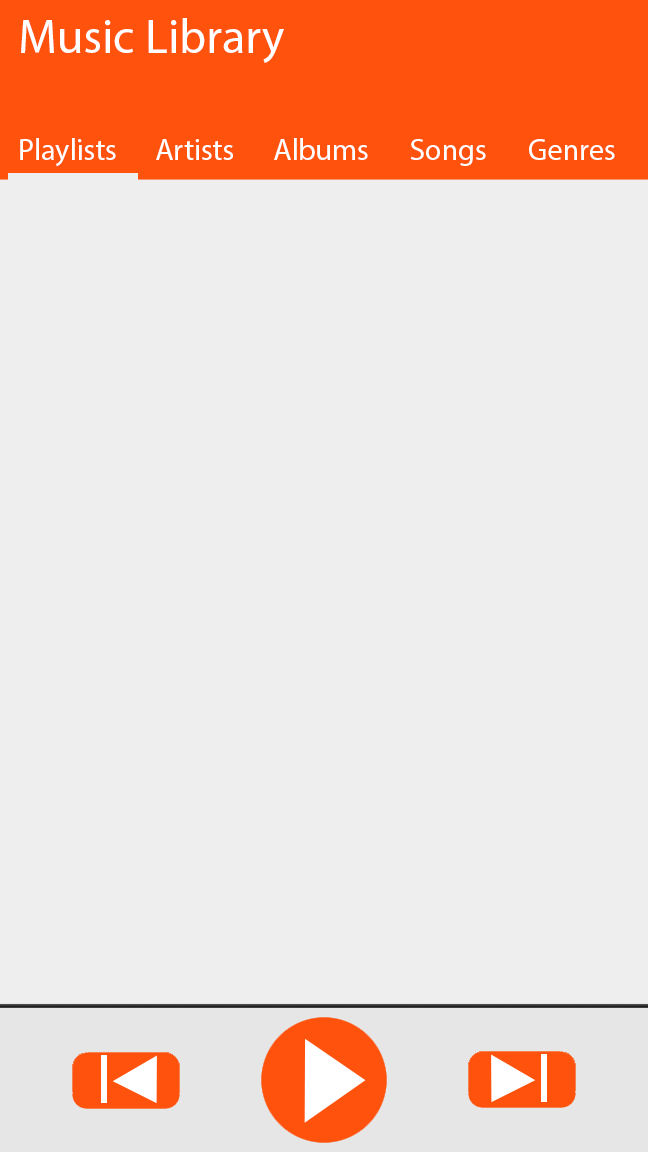
<style>
.page{position:relative;width:648px;height:1152px;background:#eeeeee}
.page>*{position:absolute;margin:0}
.t1{font:48px "MyriadPro-Regular";color:#ffffff}
.t2{font:30px "MyriadPro-Regular";color:#ffffff}
</style>
<div class="page">
<p class="t1" style="left:21px;top:18px;width:263px;height:45px">Music Library</p>
<p class="t2" style="left:20px;top:138px;width:96px;height:29px">Playlists</p>
<p class="t2" style="left:156px;top:139px;width:77px;height:21px">Artists</p>
<p class="t2" style="left:274px;top:138px;width:94px;height:22px">Albums</p>
<p class="t2" style="left:410px;top:139px;width:76px;height:27px">Songs</p>
<p class="t2" style="left:529px;top:139px;width:86px;height:21px">Genres</p>
</div>
